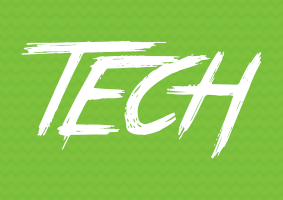
<style>
.page{position:relative;width:283px;height:200px;background:#7fc13d}
.page>*{position:absolute;margin:0}
.t1{font:114px "TrueLies";color:#ffffff}
</style>
<div class="page">
<p class="t1" style="left:21px;top:40px;width:241px;height:119px">tech</p>
</div>
